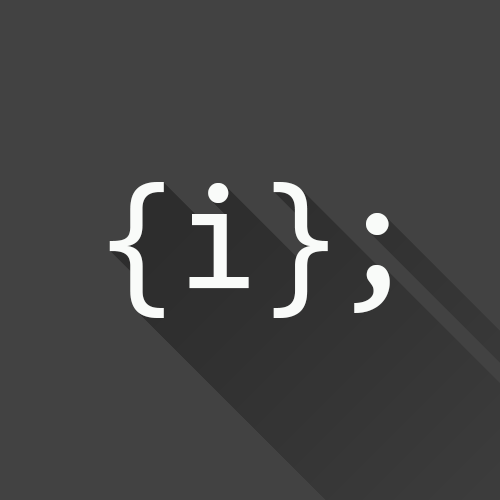
<style>
.page{position:relative;width:500px;height:500px;background:#424242}
.page>*{position:absolute;margin:0}
.t1{font:150px "Consolas";letter-spacing:-0.02em;color:#f9fbf9}
</style>
<div class="page">
<p class="t1" style="left:109px;top:182px;width:281px;height:136px">{i};</p>
</div>
